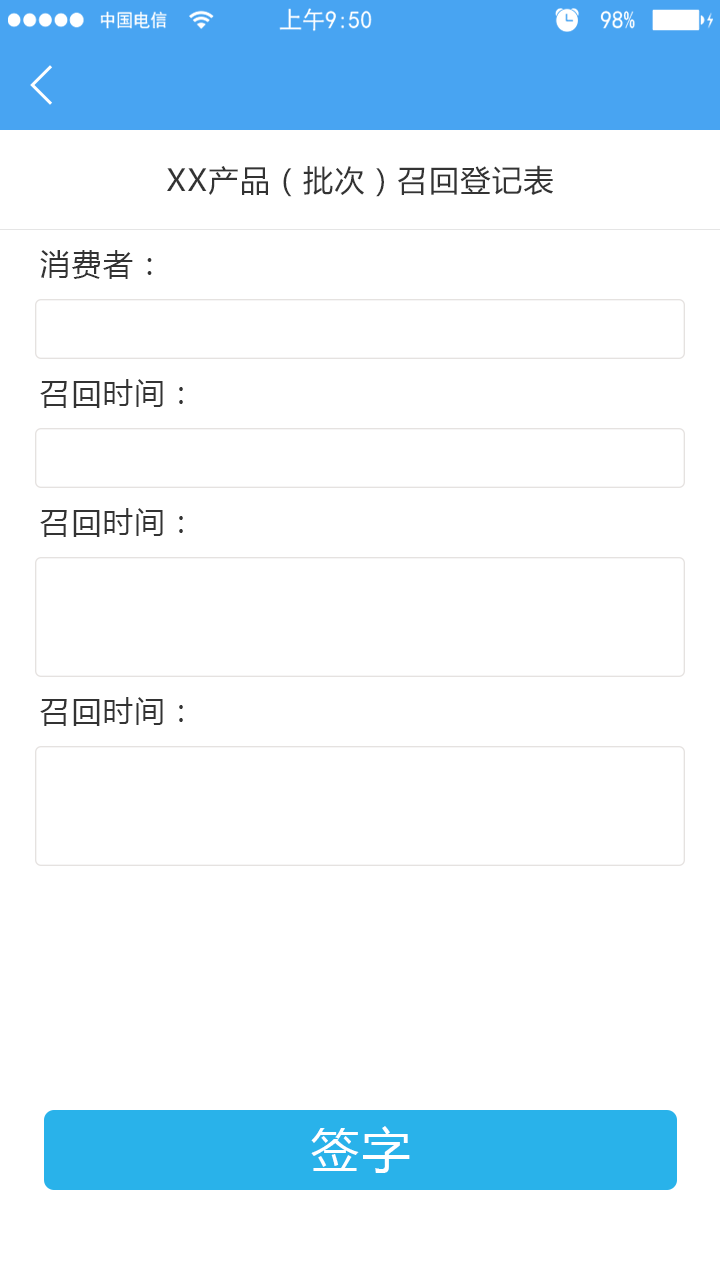
<style>
.page{position:relative;width:720px;height:1280px;background:#ffffff}
.page>*{position:absolute;margin:0}
.t1{font:30px "MicrosoftYaHei";letter-spacing:0.05em;color:#333333}
.t2{font:48px "MicrosoftYaHei";letter-spacing:0.05em;color:#ffffff}
</style>
<div class="page">
<p class="t1" style="left:167px;top:165px;width:386px;height:32px">XX产品（批次）召回登记表</p>
<p class="t1" style="left:40px;top:250px;width:112px;height:29px">消费者：</p>
<p class="t1" style="left:40px;top:379px;width:143px;height:29px">召回时间：</p>
<p class="t1" style="left:40px;top:508px;width:143px;height:29px">召回时间：</p>
<p class="t1" style="left:40px;top:697px;width:143px;height:29px">召回时间：</p>
<p class="t2" style="left:311px;top:1126px;width:99px;height:47px">签字</p>
</div>
